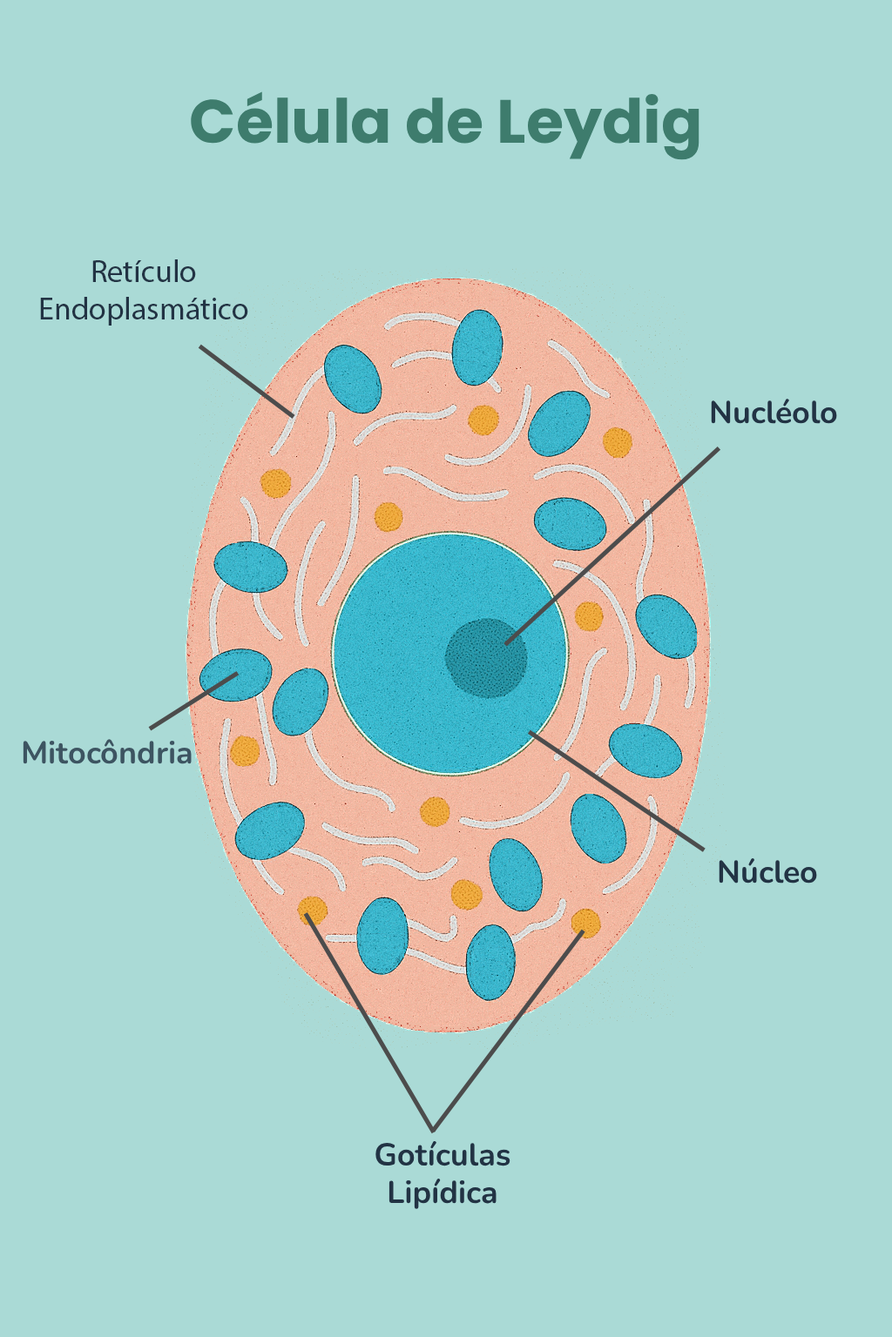
<style>
.page{position:relative;width:892px;height:1337px;background:#aadad6}
.page>*{position:absolute;margin:0}
.t1{font:60.9px "Poppins-Bold";color:#3e7c6d}
.t2{font:31.3px "MyriadPro-Regular";color:#223344}
.t3{font:31.3px "Nunito-Bold";color:#223344}
.t4{font:31.3px "Nunito-Bold";color:#3d5461}
</style>
<div class="page">
<p class="t1" style="left:191px;top:91px;width:508px;height:69px">Célula de Leydig</p>
<p class="t2" style="left:40px;top:259px;width:208px;height:67px;text-align:center">Retículo Endoplasmático</p>
<p class="t3" style="left:710px;top:399px;width:127px;height:25px">Nucléolo</p>
<p class="t4" style="left:23px;top:739px;width:169px;height:25px">Mitocôndria</p>
<p class="t3" style="left:718px;top:858px;width:99px;height:26px">Núcleo</p>
<p class="t3" style="left:375px;top:1141px;width:135px;height:68px;text-align:center">Gotículas Lipídica</p>
</div>
